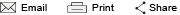
<style>
.page{position:relative;width:180px;height:15px;background:#ffffff}
.page>*{position:absolute;margin:0}
.t1{font:10.4px "ArialMT";letter-spacing:0.01em;color:#010101}
</style>
<div class="page">
<p class="t1" style="left:21px;top:4px;width:26px;height:7px">Email</p>
<p class="t1" style="left:92px;top:4px;width:22px;height:7px">Print</p>
<p class="t1" style="left:149px;top:4px;width:28px;height:7px">Share</p>
</div>
